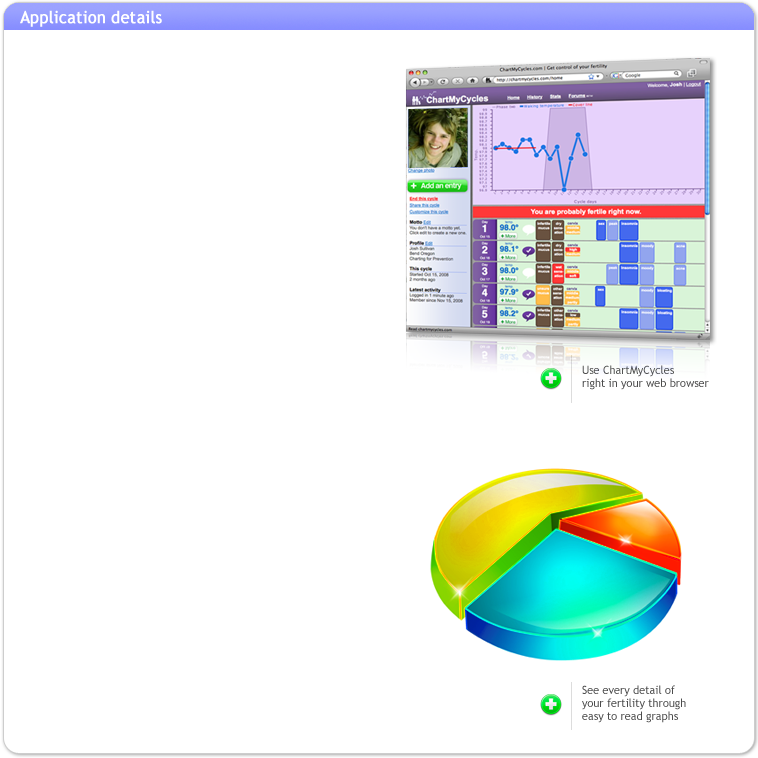
<style>
.page{position:relative;width:758px;height:758px;background:#ffffff}
.page>*{position:absolute;margin:0}
.t1{font:16.8px "TrebuchetMS";color:#ffffff;font-weight:bold;scale:0.95 1}
.t2{font:11.6px "TrebuchetMS";color:#4c4c4c;scale:0.95 1}
</style>
<div class="page">
<p class="t1" style="left:20px;top:10px;width:142px;height:17px">Application details</p>
<p class="t2" style="left:582px;top:365px;width:127px;height:25px">Use ChartMyCycles<br>right in your web browser</p>
<p class="t2" style="left:582px;top:685px;width:104px;height:38px">See every detail of <br>your fertility through<br>easy to read graphs</p>
</div>
